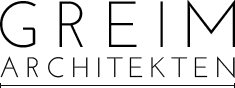
<style>
.page{position:relative;width:235px;height:88px;background:#ffffff}
.page>*{position:absolute;margin:0}
.t1{font:65px "JosefinSansStd";letter-spacing:0.18em;color:#000000}
.t2{font:28px "JosefinSansStd";letter-spacing:0.185em;color:#000000;text-transform:uppercase}
</style>
<div class="page">
<p class="t1" style="left:0px;top:0px;width:235px;height:48px">GREIM</p>
<p class="t2" style="left:0px;top:56px;width:235px;height:22px">Architekten</p>
</div>
